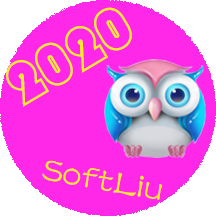
<style>
.page{position:relative;width:216px;height:216px;background:#ff28e9}
.page>*{position:absolute;margin:0}
.t1{font:60px "STCaiyun";color:#f9ee1c}
.t2{font:36.1px "FZSTK--GBK1-0";color:#f9ee1c}
</style>
<div class="page">
<p class="t1" style="left:6px;top:7px;width:126px;height:100px;rotate:-31deg">2020</p>
<p class="t2" style="left:42px;top:160px;width:120px;height:40px;rotate:10deg">SoftLiu</p>
</div>
